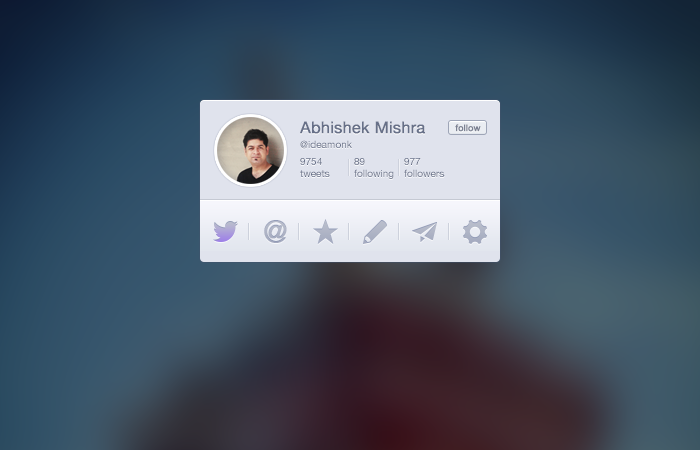
<style>
.page{position:relative;width:700px;height:450px}
.page>*{position:absolute;margin:0}
.t1{font:16px "HelveticaNeue";color:#677088;font-weight:bold}
.t2{font:9px "HelveticaNeue";color:#677088;font-weight:bold}
.t3{font:10px "HelveticaNeue";color:#677088}
.t4{font:30px "HelveticaNeue";color:#acb1c4;font-weight:bold}
</style>
<div class="page">
<p class="t1" style="left:300px;top:121px;width:125px;height:13px">Abhishek Mishra</p>
<p class="t2" style="left:455px;top:124px;width:26px;height:8px">follow</p>
<p class="t3" style="left:300px;top:140px;width:52px;height:9px">@ideamonk</p>
<p class="t3" style="left:300px;top:158px;width:30px;height:19px">9754<br>tweets</p>
<p class="t3" style="left:354px;top:158px;width:40px;height:21px">89<br>following</p>
<p class="t3" style="left:404px;top:158px;width:41px;height:19px">977<br>followers</p>
<p class="t4" style="left:264px;top:220px;width:23px;height:23px">@</p>
</div>
